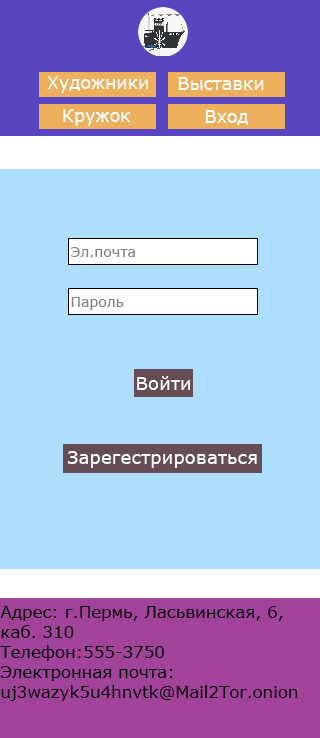
<style>
.page{position:relative;width:320px;height:738px;background:#aedefe}
.page>*{position:absolute;margin:0}
.t1{font:17.6px "Verdana";color:#fefefe}
.t2{font:14.1px "Verdana";color:#858282}
.t3{font:18.3px "Verdana";color:#fefefe}
.t4{font:16.7px "Verdana";color:#000000}
</style>
<div class="page">
<p class="t1" style="left:47px;top:76px;width:101px;height:17px">Художники</p>
<p class="t1" style="left:178px;top:77px;width:86px;height:13px">Выставки</p>
<p class="t1" style="left:63px;top:109px;width:68px;height:17px">Кружок</p>
<p class="t1" style="left:205px;top:110px;width:44px;height:15px">Вход</p>
<p class="t2" style="left:71px;top:247px;width:64px;height:10px">Эл.почта</p>
<p class="t2" style="left:71px;top:297px;width:53px;height:13px">Пароль</p>
<p class="t3" style="left:137px;top:376px;width:53px;height:14px">Войти</p>
<p class="t3" style="left:67px;top:451px;width:190px;height:17px">Зарегестрироваться</p>
<p class="t4" style="left:0px;top:606px;width:298px;height:95px">Адрес: г.Пермь, Ласьвинская, 6,<br>каб. 310<br>Телефон:555-3750<br>Электронная почта:<br>uj3wazyk5u4hnvtk@Mail2Tor.onion</p>
</div>
